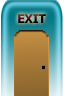
<style>
.page{position:relative;width:64px;height:96px}
.page>*{position:absolute;margin:0}
.t1{font:12px "Tahoma-Bold"}
</style>
<div class="page">
<p class="t1" style="left:18px;top:14px;width:28px;height:9px">EXIT</p>
</div>
